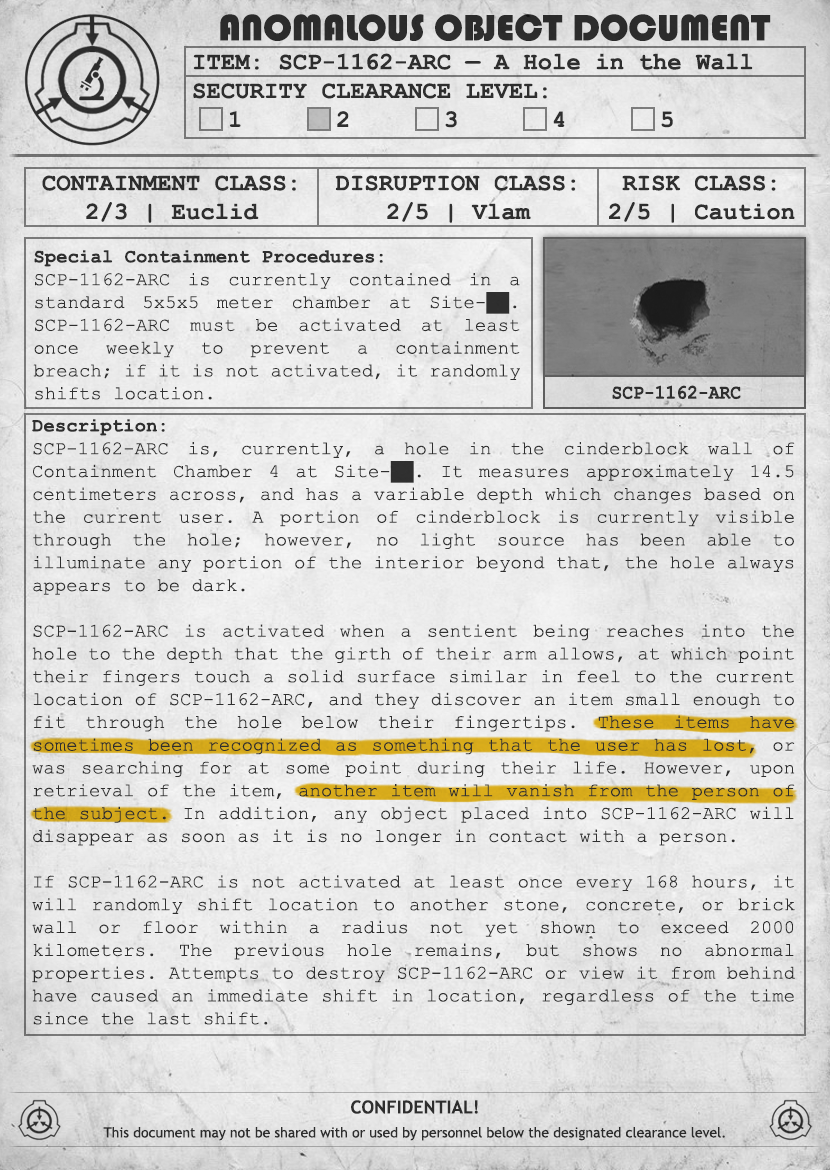
<style>
.page{position:relative;width:830px;height:1170px}
.page>*{position:absolute;margin:0}
.t1{font:38px "Bauhaus93";color:#333333;text-transform:uppercase}
.t2{font:24px "CourierNewPS-BoldMT";color:#333333}
.t3{font:24px "CourierNewPS-BoldMT";color:#333333;text-transform:uppercase}
.t4{font:19px "CourierNewPSMT";color:#333333}
.t5{font:19px "CourierNewPS-BoldMT";color:#333333}
.t6{font:20.1px "CourierNewPS-BoldMT";color:#333333;scale:0.9 1}
.t7{font:14px/24px "TrebuchetMS";color:#333333}
.t8{font:18px/24px "TrebuchetMS-Bold";color:#333333}
</style>
<div class="page">
<p class="t1" style="left:220px;top:14px;width:551px;height:27px">anomalous object document</p>
<p class="t2" style="left:193px;top:53px;width:560px;height:75px">ITEM: SCP-1162-ARC — A Hole in the Wall<br><span class="t3">Security CLEARANCE LEVEL:</span> <br> 1   2   3   4   5</p>
<p class="t2" style="left:42px;top:175px;width:254px;height:48px;text-align:center">CONTAINMENT CLASS:<br>2/3 | Euclid</p>
<p class="t2" style="left:335px;top:175px;width:241px;height:48px;text-align:center">DISRUPTION CLASS:<br>2/5 | Vlam</p>
<p class="t2" style="left:609px;top:175px;width:186px;height:48px;text-align:center">RISK CLASS:<br>2/5 | Caution</p>
<p class="t4" style="left:33px;top:250px;width:487px;height:150px;text-align:justify"><span class="t5">Special Containment Procedures:<br></span>SCP-1162-ARC is currently contained in a standard 5x5x5 meter chamber at Site-██. SCP-1162-ARC must be activated at least once weekly to prevent a containment breach; if it is not activated, it randomly shifts location.</p>
<p class="t6" style="left:612px;top:385px;width:129px;height:15px">SCP-1162-ARC</p>
<p class="t4" style="left:32px;top:419px;width:763px;height:606px;text-align:justify"><span class="t5">Description:<br></span>SCP-1162-ARC is, currently, a hole in the cinderblock wall of Containment Chamber 4 at Site-██. It measures approximately 14.5 centimeters across, and has a variable depth which changes based on the current user. A portion of cinderblock is currently visible through the hole; however, no light source has been able to illuminate any portion of the interior beyond that, the hole always appears to be dark.<br><br>SCP-1162-ARC is activated when a sentient being reaches into the hole to the depth that the girth of their arm allows, at which point their fingers touch a solid surface similar in feel to the current location of SCP-1162-ARC, and they discover an item small enough to fit through the hole below their fingertips. These items have sometimes been recognized as something that the user has lost, or was searching for at some point during their life. However, upon retrieval of the item, another item will vanish from the person of the subject. In addition, any object placed into SCP-1162-ARC will disappear as soon as it is no longer in contact with a person.<br><br>If SCP-1162-ARC is not activated at least once every 168 hours, it will randomly shift location to another stone, concrete, or brick wall or floor within a radius not yet shown to exceed 2000 kilometers. The previous hole remains, but shows no abnormal properties. Attempts to destroy SCP-1162-ARC or view it from behind have caused an immediate shift in location, regardless of the time since the last shift.</p>
<p class="t7" style="left:103px;top:1100px;width:622px;height:41px;text-align:center"><span class="t8">CONFIDENTIAL!<br></span>This document may not be shared with or used by personnel below the designated clearance level.</p>
</div>
